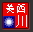
<style>
.page{position:relative;width:33px;height:32px;background:#f20000}
.page>*{position:absolute;margin:0}
.t1{font:10.4px "SimSun";color:#ffffff}
.t2{font:11.7px "SimSun";color:#ffffff}
</style>
<div class="page">
<p class="t1" style="left:6px;top:4px;width:19px;height:9px">美西</p>
<p class="t2" style="left:16px;top:15px;width:11px;height:12px">川</p>
</div>
